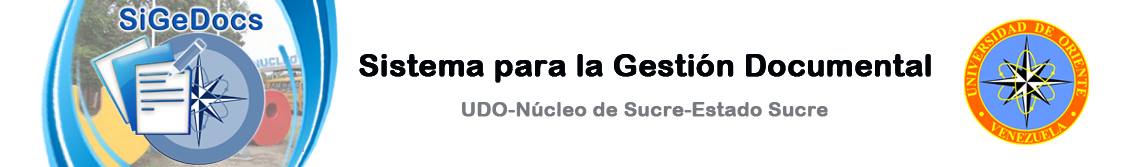
<style>
.page{position:relative;width:1134px;height:167px;background:#ffffff}
.page>*{position:absolute;margin:0}
.t1{font:31px "ArialRoundedMTBold";color:#000408;font-weight:bold}
.t2{font:20px "ArialRoundedMTBold";color:#777b7f;font-weight:bold}
</style>
<div class="page">
<p class="t1" style="left:359px;top:54px;width:572px;height:29px">Sistema para la Gestión Documental</p>
<p class="t1" style="left:359px;top:54px;width:572px;height:29px">Sistema para la Gestión Documental</p>
<p class="t2" style="left:462px;top:102px;width:366px;height:15px">UDO-Núcleo de Sucre-Estado Sucre</p>
</div>
